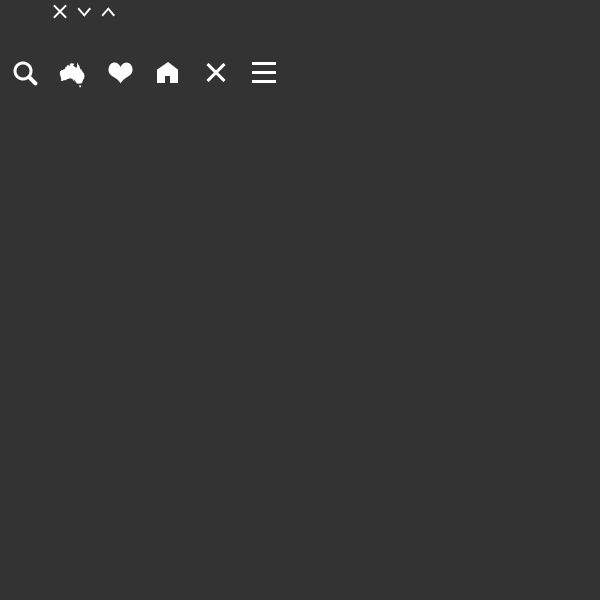
<style>
.page{position:relative;width:600px;height:600px;background:#333333}
.page>*{position:absolute;margin:0}
.t1{font:23.8px "TheSans-B5Plain";letter-spacing:-0.02em;color:#ffffff;scale:1.03 1}
</style>
<div class="page">
<p class="t1" style="left:77px;top:7px;width:14px;height:10px;rotate:90deg">&gt;</p>
<p class="t1" style="left:101px;top:7px;width:14px;height:10px;rotate:-90deg">&gt;</p>
</div>
